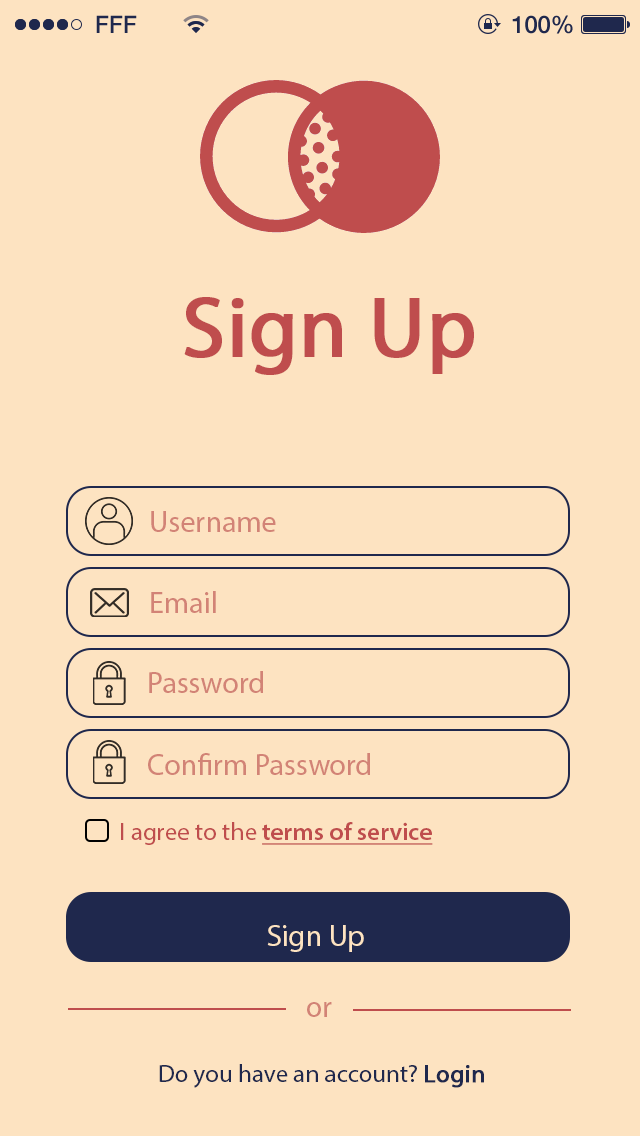
<style>
.page{position:relative;width:640px;height:1136px;background:#fde3c1}
.page>*{position:absolute;margin:0}
.t1{font:24px "HelveticaNeue-Medium";color:#1f284d}
.t2{font:86px "MyriadPro-Regular";color:#bf4d4d;font-weight:bold}
.t3{font:30px "MyriadPro-Regular";color:#d28376}
.t4{font:25px "MyriadPro-Semibold";color:#bf4d4d;text-decoration:underline}
.t5{font:25px "MyriadPro-Regular";color:#bf4d4d}
.t6{font:30px "MyriadPro-Regular";color:#fde3c1}
.t7{font:25px "MyriadPro-Regular";color:#1f284d}
.t8{font:25px "MyriadPro-Regular";color:#1f284d;font-weight:bold}
</style>
<div class="page">
<p class="t1" style="left:96px;top:15px;width:41px;height:18px">FFF</p>
<p class="t1" style="left:512px;top:15px;width:61px;height:19px">100%</p>
<p class="t2" style="left:184px;top:297px;width:290px;height:78px">Sign Up</p>
<p class="t3" style="left:151px;top:511px;width:125px;height:21px">Username</p>
<p class="t3" style="left:151px;top:591px;width:65px;height:22px">Email</p>
<p class="t3" style="left:149px;top:671px;width:114px;height:22px">Password</p>
<p class="t3" style="left:148px;top:753px;width:222px;height:22px">Confirm Password</p>
<p class="t4" style="left:121px;top:822px;width:312px;height:23px"><span class="t5">I agree to the </span>terms of service</p>
<p class="t6" style="left:267px;top:925px;width:97px;height:27px">Sign Up</p>
<p class="t3" style="left:307px;top:1002px;width:25px;height:15px">or</p>
<p class="t7" style="left:159px;top:1064px;width:325px;height:24px">Do you have an account? <span class="t8">Login</span></p>
</div>
